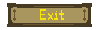
<style>
.page{position:relative;width:100px;height:30px;background:#ffffff}
.page>*{position:absolute;margin:0}
.t1{font:12.5px "KarmaSuture-Regular";color:#f8e40a}
</style>
<div class="page">
<p class="t1" style="left:40px;top:9px;width:24px;height:11px">Exit</p>
</div>
